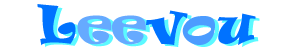
<style>
.page{position:relative;width:292px;height:48px;background:#ffffff}
.page>*{position:absolute;margin:0}
.t1{font:48px "Ravie";color:#66aaff}
.t2{font:48px "Ravie";color:#0072ff}
.t3{font:48px "Ravie";color:#4c9cff}
.t4{font:48px "Ravie"}
</style>
<div class="page">
<p class="t1" style="left:37px;top:4px;width:219px;height:42px"><span class="t2">L</span>ee<span class="t2">v</span><span class="t3">o</span><span class="t2">u</span></p>
<p class="t4" style="left:41px;top:6px;width:219px;height:42px">Leevou</p>
</div>
